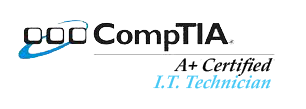
<style>
.page{position:relative;width:306px;height:109px;background:#ffffff}
.page>*{position:absolute;margin:0}
.t1{font:18px "PalatinoLinotype-BoldItalic";color:#020202;font-style:italic}
.t2{font:18px "PalatinoLinotype-BoldItalic";color:#46c8f5;font-style:italic}
</style>
<div class="page">
<p class="t1" style="left:174px;top:57px;width:99px;height:19px">A+ Certified</p>
<p class="t2" style="left:153px;top:75px;width:118px;height:14px">I.T. Technician</p>
</div>
